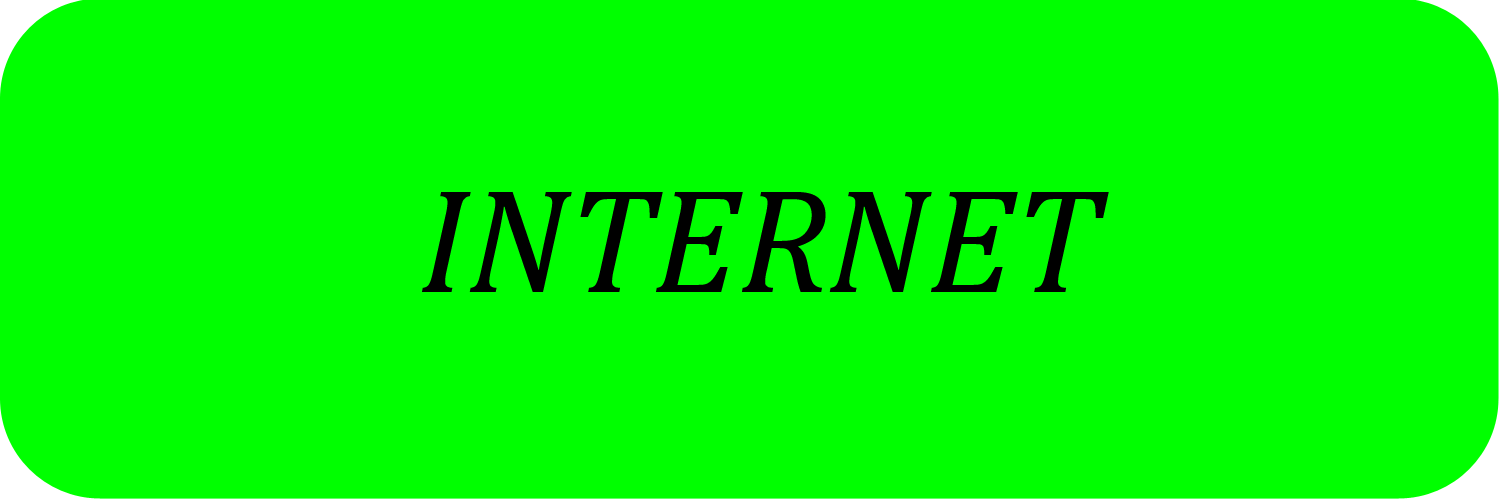
<style>
.page{position:relative;width:1500px;height:500px;background:#00ff00}
.page>*{position:absolute;margin:0}
.t1{font:150px "Cambria-Italic";color:#000000}
</style>
<div class="page">
<p class="t1" style="left:422px;top:192px;width:687px;height:100px">INTERNET</p>
</div>
